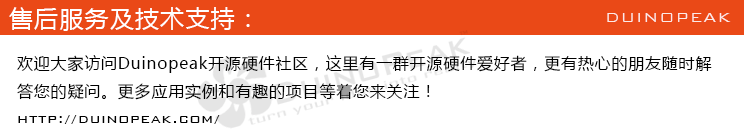
<style>
.page{position:relative;width:744px;height:137px;background:#ffffff}
.page>*{position:absolute;margin:0}
.t1{font:24px "MicrosoftYaHei";letter-spacing:0.05em;color:#ffffff}
.t2{font:18px "BankGothicBT-Light";letter-spacing:0.05em;color:#ffffff}
.t3{font:16px "MicrosoftYaHei";letter-spacing:0.05em;color:#000000}
.t4{font:16px "BankGothicBT-Light";letter-spacing:0.05em;color:#000000}
</style>
<div class="page">
<p class="t1" style="left:9px;top:7px;width:241px;height:24px">售后服务及技术支持：</p>
<p class="t2" style="left:607px;top:13px;width:124px;height:9px;opacity:0.85">DUINOPEAK</p>
<p class="t3" style="left:17px;top:55px;width:695px;height:69px">欢迎大家访问Duinopeak开源硬件社区，这里有一群开源硬件爱好者，更有热心的朋友随时解<br>答您的疑问。更多应用实例和有趣的项目等着您来关注！<br><span class="t4">http://duinopeak.com/</span></p>
</div>
